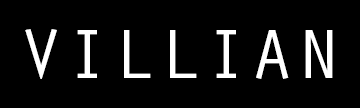
<style>
.page{position:relative;width:360px;height:108px;background:#000000}
.page>*{position:absolute;margin:0}
.t1{font:72px "OratorStd";color:#ffffff;scale:1.07 1}
</style>
<div class="page">
<p class="t1" style="left:25px;top:29px;width:308px;height:50px">VILLIAN</p>
</div>
